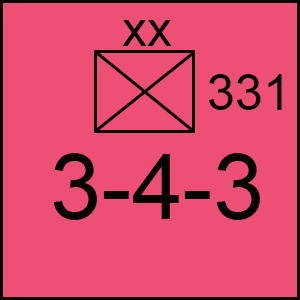
<style>
.page{position:relative;width:300px;height:300px;background:#ee4f74}
.page>*{position:absolute;margin:0}
.t1{font:50px "ArialMT";color:#000000}
.t2{font:91.7px "ArialMT";color:#000000}
</style>
<div class="page">
<p class="t1" style="left:122px;top:20px;width:50px;height:26px">xx</p>
<p class="t1" style="left:209px;top:74px;width:73px;height:36px">331</p>
<p class="t2" style="left:53px;top:153px;width:207px;height:67px">3-4-3</p>
</div>
